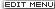
<style>
.page{position:relative;width:55px;height:9px;background:#ffffff}
.page>*{position:absolute;margin:0}
.t1{font:8px "SFIntermosaicB";color:#333333}
</style>
<div class="page">
<p class="t1" style="left:5px;top:2px;width:48px;height:5px">edit menu</p>
</div>
